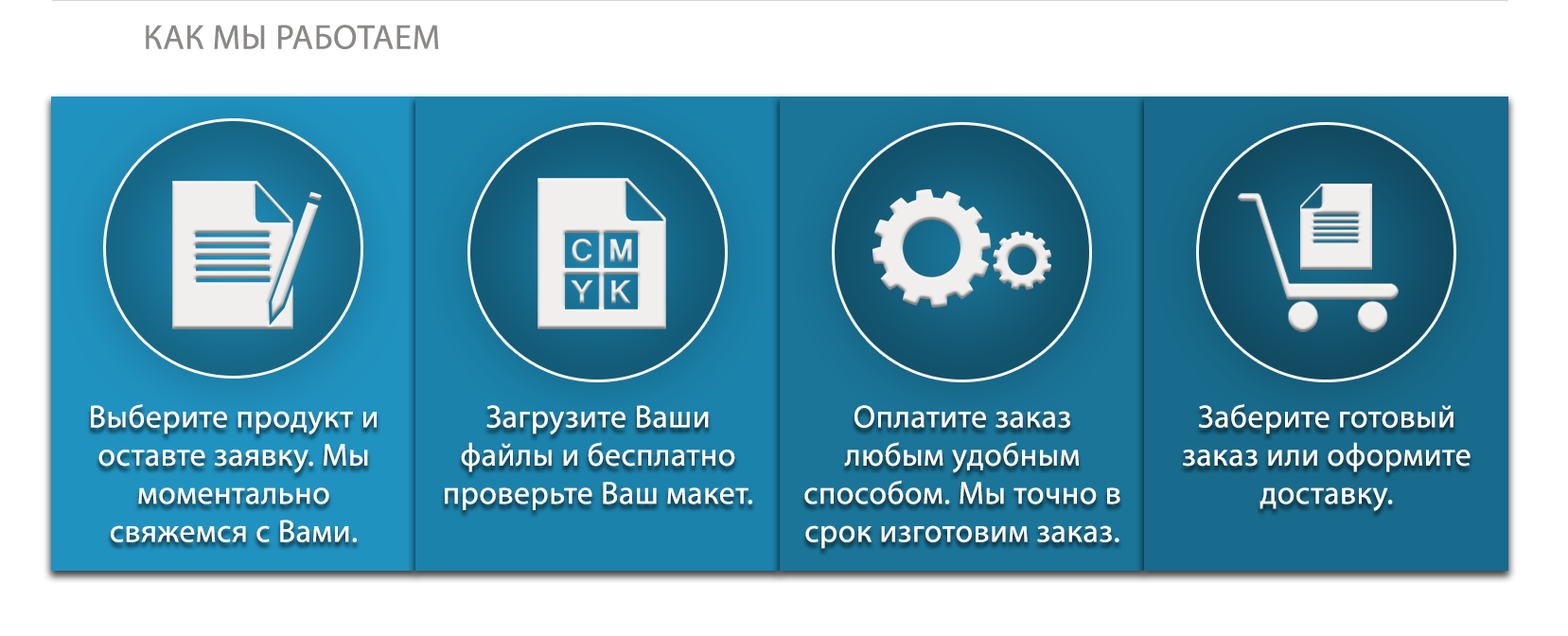
<style>
.page{position:relative;width:1568px;height:636px;background:#ffffff}
.page>*{position:absolute;margin:0}
.t1{font:34.7px "MyriadPro-Regular";letter-spacing:0.02em;color:#8b8987}
.t2{font:31.8px "MyriadPro-Regular";letter-spacing:0.02em;color:#ffffff}
</style>
<div class="page">
<p class="t1" style="left:146px;top:25px;width:293px;height:24px">КАК МЫ РАБОТАЕМ</p>
<p class="t2" style="left:91px;top:404px;width:286px;height:138px;text-align:center">Выберите продукт и оставте заявку. Мы моментально свяжемся с Вами.</p>
<p class="t2" style="left:445px;top:405px;width:307px;height:105px;text-align:center">Загрузите Ваши файлы и бесплатно проверьте Ваш макет.</p>
<p class="t2" style="left:804px;top:405px;width:316px;height:144px;text-align:center">Оплатите заказ любым удобным способом. Мы точно в срок изготовим заказ.</p>
<p class="t2" style="left:1183px;top:404px;width:288px;height:107px;text-align:center">Заберите готовый заказ или оформите доставку.</p>
</div>
